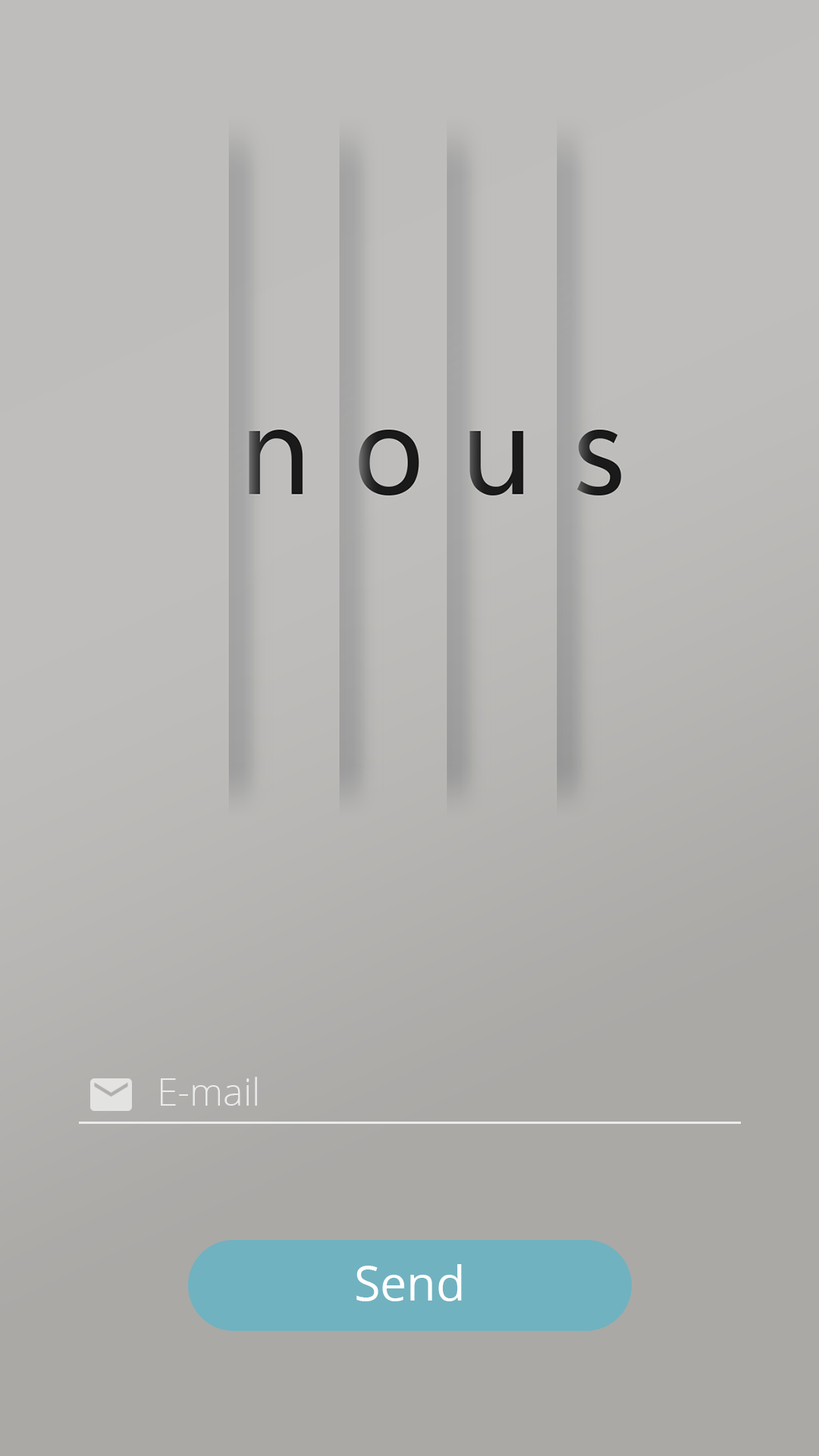
<style>
.page{position:relative;width:819px;height:1456px}
.page>*{position:absolute;margin:0}
.t1{font:37.9px "OpenSans-Light";color:#ebebeb}
.t2{font:47.4px "OpenSans";color:#ffffff}
</style>
<div class="page">
<p class="t1" style="left:161px;top:1077px;width:96px;height:29px">E-mail</p>
<p class="t2" style="left:356px;top:1264px;width:106px;height:37px">Send</p>
</div>
